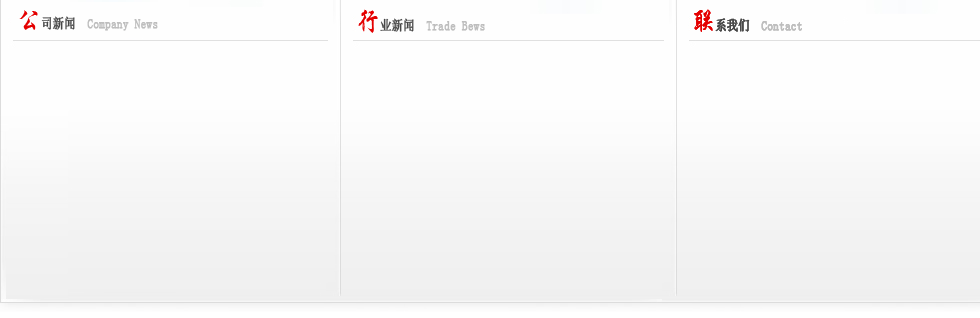
<style>
.page{position:relative;width:980px;height:318px;background:#fefefe}
.page>*{position:absolute;margin:0}
.t1{font:14px "SimSun";color:#bebebe;font-weight:bold;scale:0.8 1}
.t2{font:30px "STXingkai";color:#e40000;scale:0.8 1}
.t3{font:14px "SimSun";color:#474747;font-weight:bold;scale:0.8 1}
</style>
<div class="page">
<p class="t1" style="left:19px;top:10px;width:139px;height:21px"><span class="t2">公</span><span class="t3">司新闻  </span>Company News</p>
<p class="t1" style="left:358px;top:9px;width:127px;height:24px"><span class="t2">行</span><span class="t3">业新闻  </span>Trade Bews</p>
<p class="t1" style="left:694px;top:9px;width:108px;height:23px"><span class="t2">联</span><span class="t3">系我们  </span>Contact</p>
<p class="t1" style="left:694px;top:9px;width:108px;height:23px"><span class="t2">联</span><span class="t3">系我们  </span>Contact</p>
</div>
